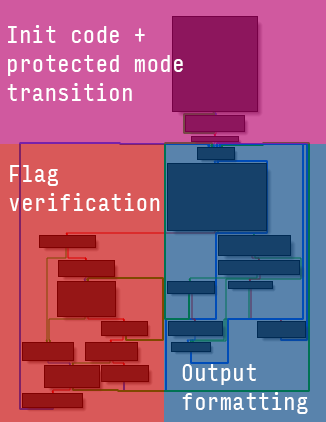
<style>
.page{position:relative;width:326px;height:422px;background:#d0599f}
.page>*{position:absolute;margin:0}
.t1{font:24px "InputMonoCompressed-Regular";color:#ffffff}
</style>
<div class="page">
<p class="t1" style="left:7px;top:25px;width:176px;height:76px">Init code +<br>protected mode<br>transition</p>
<p class="t1" style="left:9px;top:165px;width:151px;height:46px">Flag<br>verification</p>
<p class="t1" style="left:182px;top:364px;width:126px;height:50px">Output<br>formatting</p>
</div>
